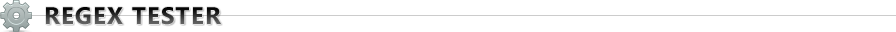
<style>
.page{position:relative;width:896px;height:32px;background:#ffffff}
.page>*{position:absolute;margin:0}
.t1{font:24px "Ebrima-Bold";letter-spacing:0.05em;text-transform:uppercase}
</style>
<div class="page">
<p class="t1" style="left:46px;top:7px;width:175px;height:18px">Regex Tester</p>
</div>
